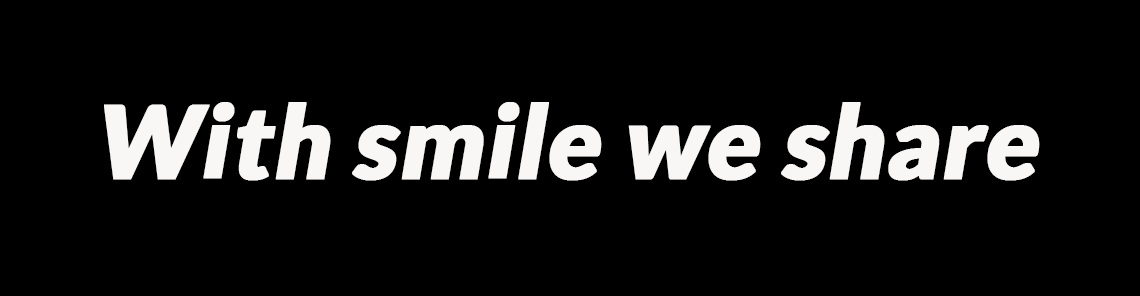
<style>
.page{position:relative;width:1140px;height:296px;background:#000000}
.page>*{position:absolute;margin:0}
.t1{font:101.3px "Lato-Black";color:#f9f7f5;font-weight:bold;font-style:italic;scale:0.96 1}
</style>
<div class="page">
<p class="t1" style="left:104px;top:102px;width:936px;height:79px">With smile we share</p>
</div>
